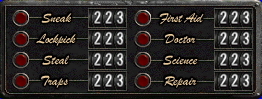
<style>
.page{position:relative;width:262px;height:99px}
.page>*{position:absolute;margin:0}
.t1{font:14.2px "BrushScriptMT";color:#e8c898}
.t2{font:14.2px "BrushScriptMT";letter-spacing:-0.02em;color:#e8c898}
.t3{font:14.2px "BrushScriptMT";letter-spacing:-0.025em;color:#e8c898}
</style>
<div class="page">
<p class="t1" style="left:41px;top:13px;width:31px;height:10px">Sneak</p>
<p class="t2" style="left:159px;top:12px;width:45px;height:13px">First Aid</p>
<p class="t3" style="left:36px;top:33px;width:40px;height:13px">Lockpick</p>
<p class="t1" style="left:165px;top:34px;width:31px;height:10px">Doctor</p>
<p class="t1" style="left:42px;top:55px;width:27px;height:10px">Steal</p>
<p class="t1" style="left:163px;top:55px;width:35px;height:10px">Science</p>
<p class="t1" style="left:41px;top:75px;width:27px;height:13px">Traps</p>
<p class="t1" style="left:164px;top:76px;width:33px;height:12px">Repair</p>
</div>
